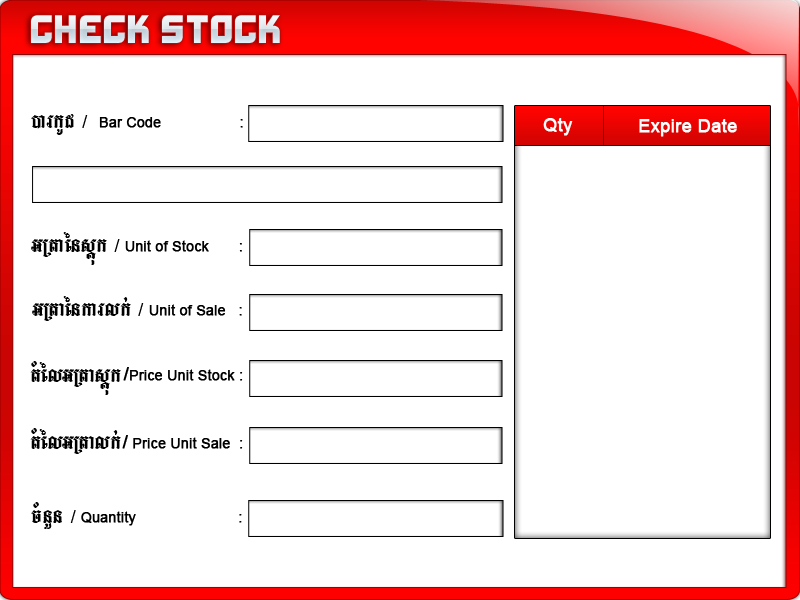
<style>
.page{position:relative;width:800px;height:600px;background:#ffffff}
.page>*{position:absolute;margin:0}
.t1{font:35.5px "Xifiction";color:#e0eaf0}
.t2{font:34px "LimonF3";color:#000000}
.t3{font:18px "ArialMT";color:#000000}
.t4{font:14px "ArialMT";color:#000000;font-weight:bold}
.t5{font:18px "ArialMT";color:#fffefe;font-weight:bold}
.t6{font:18px "ArialMT";color:#ffffff;font-weight:bold}
.t7{font:18px "ArialMT";color:#000000;font-weight:bold}
</style>
<div class="page">
<p class="t1" style="left:31px;top:15px;width:249px;height:28px">Check Stock</p>
<p class="t2" style="left:31px;top:114px;width:57px;height:21px">)arkUd <span class="t3">/</span></p>
<p class="t4" style="left:99px;top:117px;width:62px;height:11px">Bar Code</p>
<p class="t4" style="left:240px;top:119px;width:3px;height:9px">:</p>
<p class="t5" style="left:543px;top:118px;width:30px;height:18px">Qty</p>
<p class="t6" style="left:639px;top:119px;width:98px;height:18px">Expire Date</p>
<p class="t2" style="left:31px;top:232px;width:89px;height:33px">GRtaénsþúk <span class="t3">/</span></p>
<p class="t4" style="left:125px;top:240px;width:117px;height:12px">Unit of Stock       :</p>
<p class="t2" style="left:32px;top:296px;width:112px;height:25px">GRtaénkarlk; <span class="t3">/</span></p>
<p class="t4" style="left:149px;top:304px;width:93px;height:12px">Unit of Sale   :</p>
<p class="t2" style="left:30px;top:361px;width:91px;height:34px">tMélGRtasþúk</p>
<p class="t4" style="left:123px;top:367px;width:120px;height:14px"><span class="t7">/</span>Price Unit Stock :</p>
<p class="t2" style="left:30px;top:428px;width:91px;height:26px">tMélGRtalk;</p>
<p class="t4" style="left:122px;top:435px;width:121px;height:14px"><span class="t7">/</span> Price Unit Sale  :</p>
<p class="t2" style="left:31px;top:502px;width:45px;height:27px">cMnYn <span class="t3">/</span></p>
<p class="t4" style="left:81px;top:511px;width:161px;height:15px">Quantity                        :</p>
</div>
